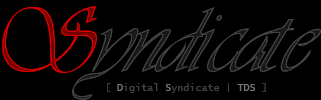
<style>
.page{position:relative;width:321px;height:100px;background:#000000}
.page>*{position:absolute;margin:0}
.t1{font:89.1px "Astrania";scale:0.91 1}
.t2{font:10px "LucidaConsole";color:#414141}
.t3{font:10px "LucidaConsole";color:#767676}
</style>
<div class="page">
<p class="t1" style="left:2px;top:6px;width:95px;height:67px">S</p>
<p class="t1" style="left:72px;top:7px;width:249px;height:93px">yndicate</p>
<p class="t2" style="left:107px;top:83px;width:159px;height:10px">[ <span class="t3">D</span>igital <span class="t3">S</span>yndicate | <span class="t3">TDS</span> ]</p>
</div>
